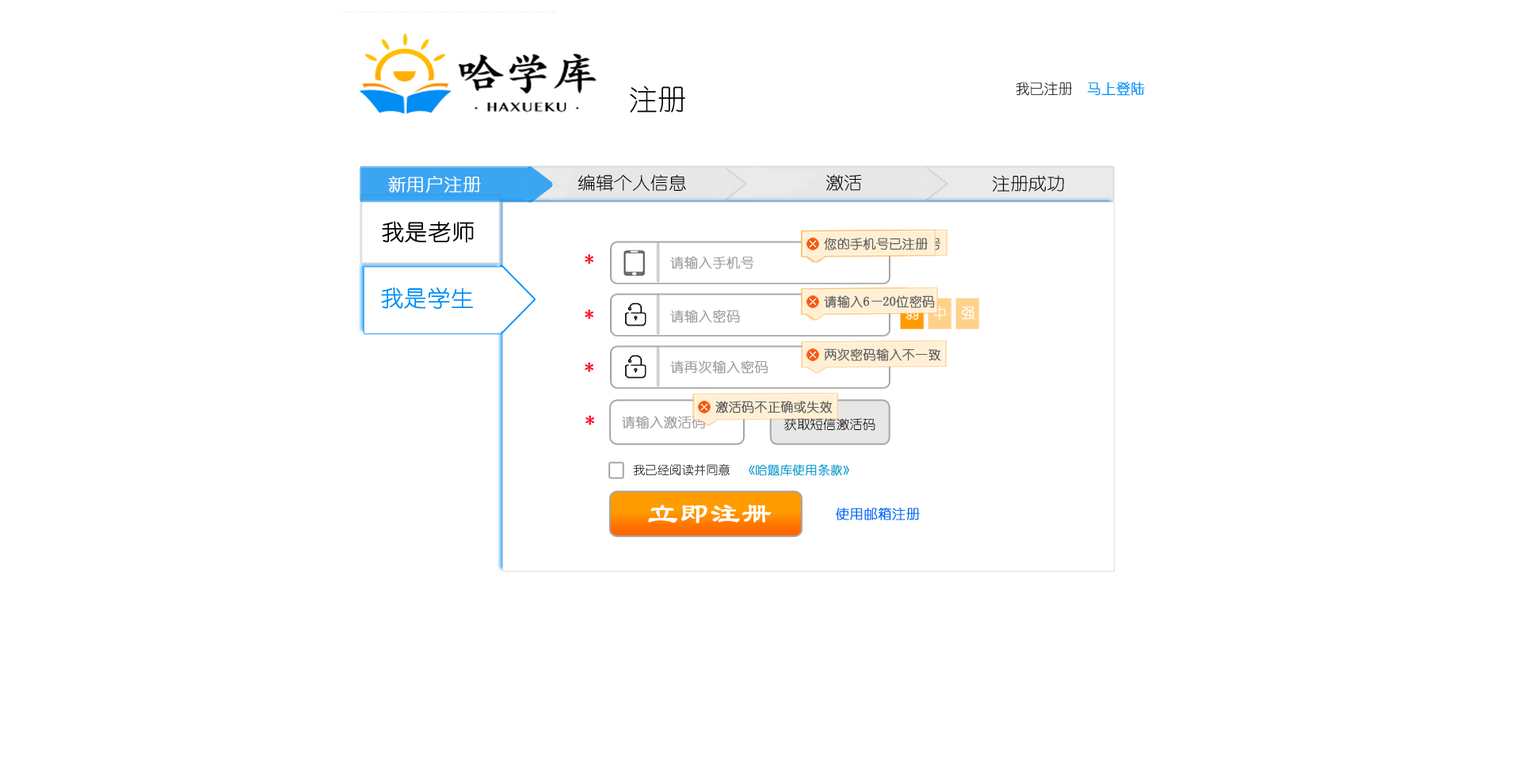
<style>
.page{position:relative;width:1521px;height:784px;background:#ffffff}
.page>*{position:absolute;margin:0}
.t1{font:28.5px "YouYuan";color:#000000}
.t2{font:14.3px "YouYuan";color:#000000}
.t3{font:14.3px "YouYuan";color:#008ef5;font-weight:bold}
.t4{font:17.2px "YouYuan";color:#fffdfd;font-weight:bold;scale:1.06 1}
.t5{font:17.2px "YouYuan";color:#000000;scale:1.06 1}
.t6{font:22.1px "YouYuan";color:#000000;font-weight:bold;scale:1.03 1}
.t7{font:12.7px "YouYuan";color:#5e5e5e;font-weight:bold}
.t8{font:17.7px "YouYuan";color:#ff051d;font-weight:bold;scale:1.03 1}
.t9{font:13.2px "YouYuan";color:#9b9b9b;font-weight:bold;scale:1.03 1}
.t10{font:22.1px "YouYuan";color:#008ef5;font-weight:bold;scale:1.03 1}
.t11{font:12.7px "YouYuan";font-weight:bold}
.t12{font:14.3px "YouYuan";font-weight:bold}
.t13{font:14.3px "YouYuan";color:#ffffff;font-weight:bold}
.t14{font:12.7px "YouYuan";color:#010101;scale:1.03 1}
.t15{font:11.8px "YouYuan";color:#119cd0;font-weight:bold;scale:1.03 1}
.t16{font:11.8px "YouYuan";color:#000000;scale:1.03 1}
.t17{font:29.4px "LiSu";color:#ffffff;font-weight:bold;scale:1.03 1}
.t18{font:13.2px "YouYuan";color:#0a68f5;font-weight:bold;scale:1.03 1}
</style>
<div class="page">
<p class="t1" style="left:630px;top:86px;width:55px;height:26px">注册</p>
<p class="t2" style="left:1015px;top:82px;width:130px;height:14px">我已注册  <span class="t3">马上登陆</span></p>
<p class="t4" style="left:388px;top:176px;width:93px;height:17px">新用户注册</p>
<p class="t5" style="left:577px;top:174px;width:109px;height:18px">编辑个人信息</p>
<p class="t5" style="left:826px;top:174px;width:36px;height:17px">激活</p>
<p class="t5" style="left:992px;top:175px;width:72px;height:17px">注册成功</p>
<p class="t6" style="left:382px;top:221px;width:92px;height:22px">我是老师</p>
<p class="t7" style="left:824px;top:238px;width:103px;height:12px">您的手机号已注册</p>
<p class="t8" style="left:585px;top:254px;width:8px;height:10px">*</p>
<p class="t9" style="left:670px;top:256px;width:84px;height:13px">请输入手机号</p>
<p class="t10" style="left:381px;top:288px;width:92px;height:21px">我是学生</p>
<p class="t11" style="left:824px;top:295px;width:65px;height:13px">请输入密码</p>
<p class="t7" style="left:824px;top:295px;width:111px;height:13px">请输入6—20位密码</p>
<p class="t12" style="left:934px;top:306px;width:12px;height:14px">中</p>
<p class="t8" style="left:585px;top:310px;width:8px;height:9px">*</p>
<p class="t9" style="left:670px;top:310px;width:70px;height:13px">请输入密码</p>
<p class="t12" style="left:905px;top:307px;width:14px;height:13px">弱</p>
<p class="t13" style="left:961px;top:307px;width:14px;height:13px">强</p>
<p class="t7" style="left:824px;top:348px;width:116px;height:13px">两次密码输入不一致</p>
<p class="t8" style="left:585px;top:362px;width:8px;height:10px">*</p>
<p class="t9" style="left:670px;top:360px;width:97px;height:14px">请再次输入密码</p>
<p class="t7" style="left:715px;top:401px;width:117px;height:12px">激活码不正确或失效</p>
<p class="t8" style="left:585px;top:415px;width:9px;height:10px">*</p>
<p class="t9" style="left:621px;top:416px;width:84px;height:13px">请输入激活码</p>
<p class="t14" style="left:784px;top:418px;width:91px;height:13px">获取短信激活码</p>
<p class="t15" style="left:633px;top:464px;width:216px;height:12px"><span class="t16">我已经阅读并同意  </span>《哈题库使用条款》</p>
<p class="t17" style="left:648px;top:505px;width:123px;height:19px">立即注册</p>
<p class="t18" style="left:836px;top:508px;width:84px;height:12px">使用邮箱注册</p>
</div>
